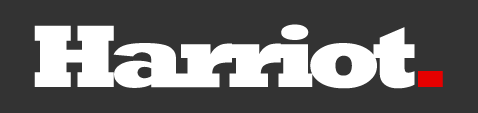
<style>
.page{position:relative;width:478px;height:113px;background:#333333}
.page>*{position:absolute;margin:0}
.t1{font:90px "Rockwell-ExtraBold";letter-spacing:-0.08em;color:#ffffff;scale:1.11 1}
.t2{font:90px "Rockwell-ExtraBold";letter-spacing:-0.08em;color:#e60000;scale:1.11 1}
</style>
<div class="page">
<p class="t1" style="left:34px;top:24px;width:409px;height:65px">Harriot<span class="t2">.</span></p>
</div>
